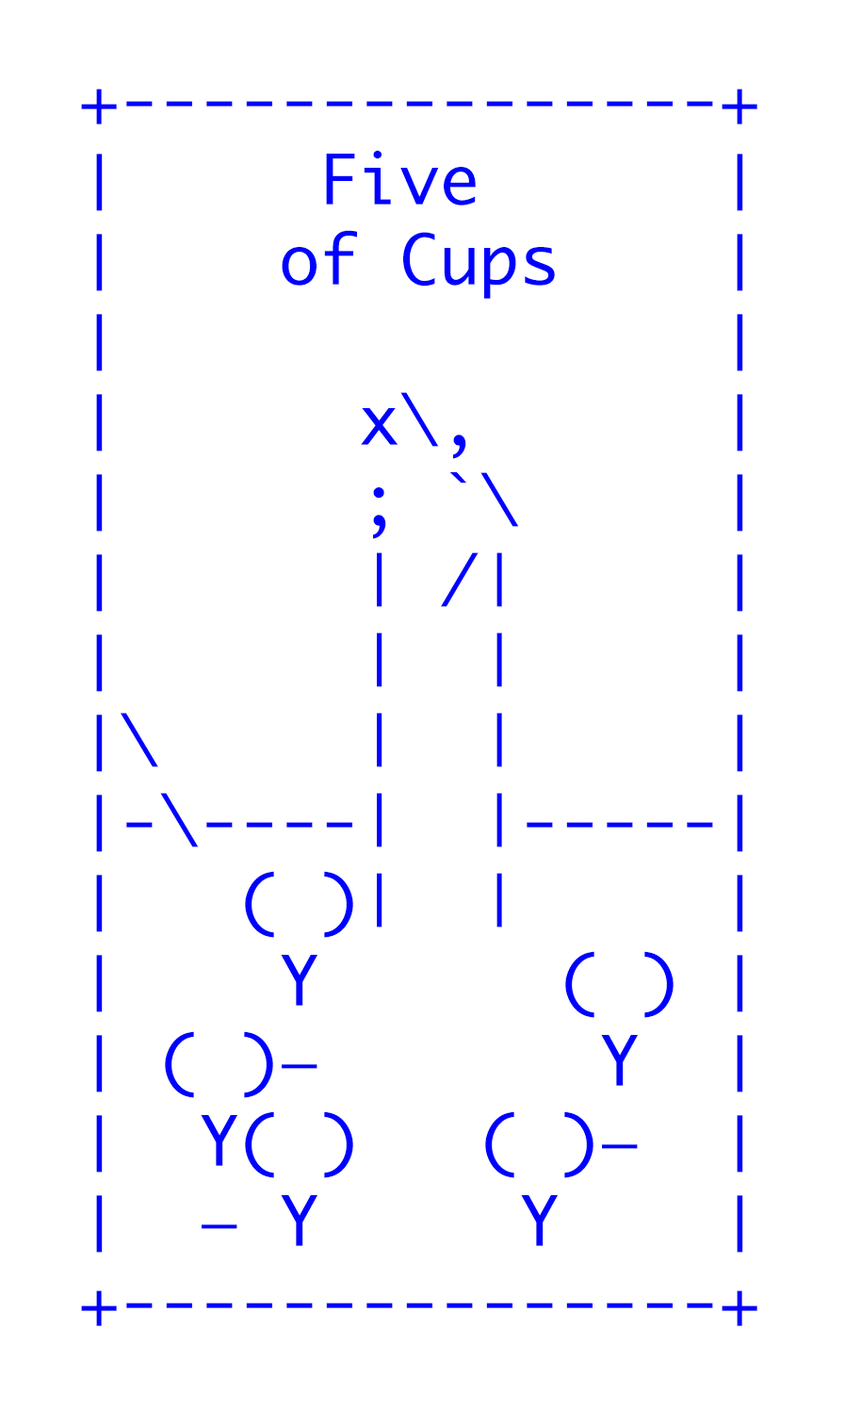
<style>
.page{position:relative;width:845px;height:1411px;background:#ffffff}
.page>*{position:absolute;margin:0}
.t1{font:66.7px "Monaco";color:#0000ff}
</style>
<div class="page">
<p class="t1" style="left:81px;top:89px;width:677px;height:1237px">+---------------+<br>│     Five      │<br>│    of Cups    │<br>│               │<br>│      x\,      │<br>│      ; `\     │<br>│      | /|     │<br>│      |  |     │ <br>│\     |  |     │ <br>│-\----|  |-----│<br>│   ( )|  |     │ <br>│    Y      ( ) │ <br>│ ( )—       Y  │<br>│  Y( )   ( )—  │<br>│  — Y     Y    │<br>+---------------+</p>
</div>
